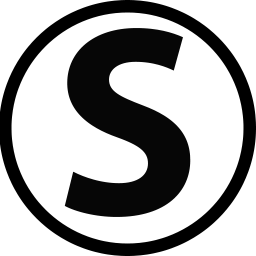
<style>
.page{position:relative;width:256px;height:256px;background:#ffffff}
.page>*{position:absolute;margin:0}
.t1{font:270.8px "MyriadPro-Bold";color:#060606}
</style>
<div class="page">
<p class="t1" style="left:64px;top:28px;width:127px;height:189px">S</p>
</div>
